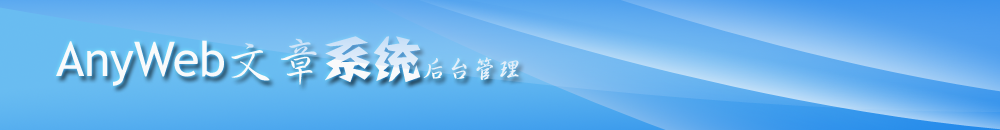
<style>
.page{position:relative;width:1000px;height:130px}
.page>*{position:absolute;margin:0}
.t1{font:48px "TrebuchetMS";color:#f9fafb}
.t2{font:48px "¾­µäÐÐÊé¼ò Regular";color:#f9fafb;font-weight:bold}
.t3{font:48px "FZJZJW--GB1-0";color:#f9fafb;font-weight:bold}
.t4{font:24px "¾­µäÐÐÊé¼ò Regular";color:#f9fafb;font-weight:bold}
</style>
<div class="page">
<p class="t1" style="left:56px;top:36px;width:463px;height:50px">AnyWeb<span class="t2">文章</span><span class="t3">系统</span><span class="t4">后台管理</span></p>
</div>
